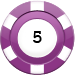
<style>
.page{position:relative;width:75px;height:75px;background:#ffffff}
.page>*{position:absolute;margin:0}
.t1{font:18px "Rockwell";color:#000000}
</style>
<div class="page">
<p class="t1" style="left:33px;top:31px;width:9px;height:12px">5</p>
</div>
